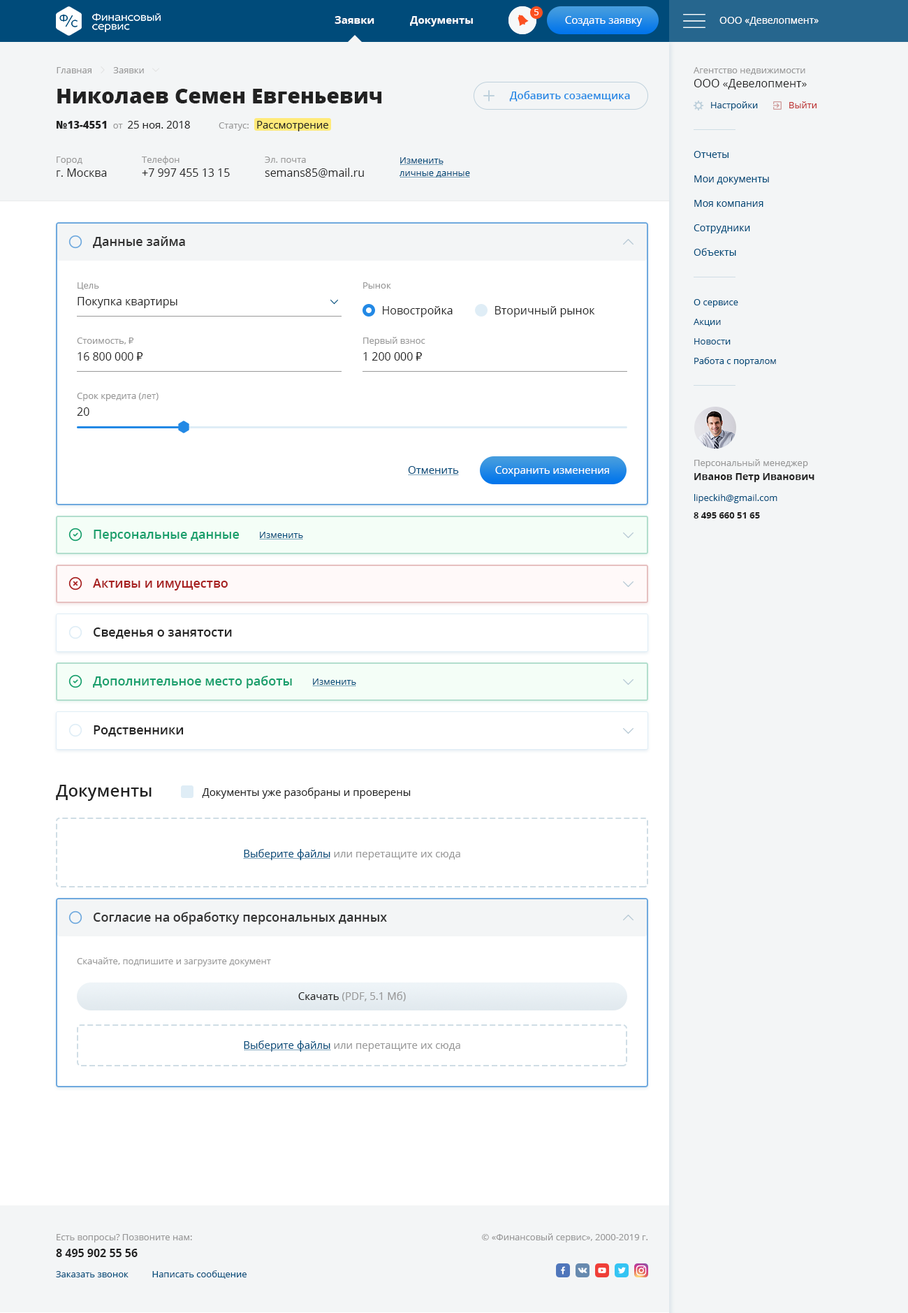
<style>
.page{position:relative;width:908px;height:1313px;background:#ffffff}
.page>*{position:absolute;margin:0}
.t1{font:10.5px "OpenSans-Bold";color:#ffffff}
.t2{font:9.1px "OpenSans";color:#ffffff}
.t3{font:10.5px "OpenSans";color:#ffffff}
.t4{font:9.8px "OpenSans";color:#ffffff}
.t5{font:9.1px "OpenSans";color:#999999}
.t6{font:11.2px/14px "OpenSans";color:#222222}
.t7{font:21px "OpenSans-Extrabold";color:#222222}
.t8{font:10.5px "OpenSans-Semibold";color:#2389e5}
.t9{font:9.1px "OpenSans";color:#004b7a}
.t10{font:9.1px "OpenSans";color:#be3030}
.t11{font:10.5px "OpenSans";color:#222222}
.t12{font:10.5px "OpenSans-Extrabold";color:#222222}
.t13{font:9.1px/12.6px "OpenSans";color:#004b7a}
.t14{font:9.8px/24.5px "OpenSans";color:#004b7a}
.t15{font:12.6px "OpenSans-Semibold";color:#333333}
.t16{font:11.2px/16.8px "OpenSans";color:#222222}
.t17{font:9.1px/19.6px "OpenSans";color:#004b7a}
.t18{font:11.2px "OpenSans";color:#222222}
.t19{font:9.1px "Tahoma";color:#999999}
.t20{font:11.2px/16.8px "Tahoma";color:#222222}
.t21{font:9.8px/14px "OpenSans-Bold";color:#222222}
.t22{font:10.5px "OpenSans";color:#004b7a}
.t23{font:9.1px "OpenSans-Bold";color:#222222}
.t24{font:12.6px "OpenSans-Semibold";color:#189f6c}
.t25{font:12.6px "OpenSans-Semibold";color:#a71f1f}
.t26{font:12.6px "OpenSans-Semibold";color:#222222}
.t27{font:16.8px "OpenSans-Semibold";color:#222222}
.t28{font:10.5px "OpenSans";color:#999999}
.t29{font:9.1px/16.8px "OpenSans";color:#999999}
.t30{font:11.2px/16.8px "OpenSans-Bold";color:#222222}
</style>
<div class="page">
<p class="t1" style="left:335px;top:16px;width:138px;height:11px">Заявки             Документы</p>
<p class="t2" style="left:534px;top:9px;width:5px;height:6px">5</p>
<p class="t3" style="left:565px;top:16px;width:78px;height:11px">Создать заявку</p>
<p class="t4" style="left:720px;top:17px;width:99px;height:9px">ООО «Девелопмент»</p>
<p class="t5" style="left:57px;top:67px;width:87px;height:6px">Главная         Заявки</p>
<p class="t5" style="left:694px;top:67px;width:113px;height:22px">Агентство недвижимости<br><span class="t6">ООО «Девелопмент»</span></p>
<p class="t7" style="left:57px;top:89px;width:325px;height:14px">Николаев Семен Евгеньевич</p>
<p class="t8" style="left:509px;top:91px;width:121px;height:10px">Добавить созаемщика</p>
<p class="t9" style="left:711px;top:101px;width:106px;height:9px">Настройки             <span class="t10">Выйти</span></p>
<p class="t11" style="left:57px;top:121px;width:133px;height:8px"><span class="t12">№13-4551  </span><span class="t5">от  </span>25 ноя. 2018</p>
<p class="t11" style="left:219px;top:121px;width:109px;height:10px"><span class="t5">Статус:   </span>Рассмотрение</p>
<p class="t6" style="left:57px;top:157px;width:50px;height:20px"><span class="t5">Город<br></span>г. Москва</p>
<p class="t6" style="left:142px;top:156px;width:88px;height:21px"><span class="t5">Телефон<br></span>+7 997 455 13 15</p>
<p class="t6" style="left:265px;top:157px;width:99px;height:20px"><span class="t5">Эл. почта<br></span>semans85@mail.ru</p>
<p class="t13" style="left:400px;top:157px;width:70px;height:20px">Изменить <br>личные данные</p>
<p class="t14" style="left:694px;top:151px;width:75px;height:105px">Отчеты<br>Мои документы<br>Моя компания<br>Сотрудники<br>Объекты</p>
<p class="t15" style="left:93px;top:236px;width:92px;height:12px">Данные займа</p>
<p class="t16" style="left:78px;top:282px;width:99px;height:26px"><span class="t5">Цель<br></span>Покупка квартиры</p>
<p class="t5" style="left:363px;top:282px;width:28px;height:7px">Рынок</p>
<p class="t17" style="left:694px;top:299px;width:82px;height:67px">О сервисе<br>Акции<br>Новости<br>Работа с порталом</p>
<p class="t18" style="left:383px;top:306px;width:70px;height:11px">Новостройка</p>
<p class="t18" style="left:495px;top:306px;width:100px;height:11px">Вторичный рынок</p>
<p class="t5" style="left:77px;top:337px;width:66px;height:24px">Стоимость, <span class="t19">₽<br></span><span class="t16">16 800 000 </span><span class="t20">₽</span></p>
<p class="t5" style="left:363px;top:337px;width:62px;height:24px">Первый взнос <br><span class="t16">1 200 000 </span><span class="t20">₽</span></p>
<p class="t5" style="left:77px;top:393px;width:82px;height:23px">Срок кредита (лет)<br><span class="t16">20</span></p>
<p class="t5" style="left:694px;top:459px;width:121px;height:23px">Персональный менеджер<br><span class="t21">Иванов Петр Иванович</span></p>
<p class="t22" style="left:408px;top:466px;width:51px;height:8px">Отменить</p>
<p class="t3" style="left:495px;top:466px;width:114px;height:11px">Сохранить изменения</p>
<p class="t9" style="left:694px;top:494px;width:84px;height:9px">lipeckih@gmail.com</p>
<p class="t23" style="left:694px;top:512px;width:66px;height:6px">8 495 660 51 65</p>
<p class="t24" style="left:94px;top:530px;width:146px;height:11px">Персональные данные</p>
<p class="t9" style="left:260px;top:532px;width:43px;height:6px">Изменить</p>
<p class="t25" style="left:93px;top:579px;width:135px;height:11px">Активы и имущество</p>
<p class="t26" style="left:94px;top:627px;width:138px;height:12px">Сведенья о занятости</p>
<p class="t24" style="left:93px;top:676px;width:199px;height:12px">Дополнительное место работы</p>
<p class="t9" style="left:313px;top:678px;width:43px;height:7px">Изменить</p>
<p class="t26" style="left:94px;top:725px;width:90px;height:11px">Родственники</p>
<p class="t27" style="left:56px;top:785px;width:96px;height:16px">Документы</p>
<p class="t11" style="left:202px;top:787px;width:209px;height:12px">Документы уже разобраны и проверены</p>
<p class="t28" style="left:244px;top:849px;width:216px;height:11px"><span class="t22">Выберите файлы </span>или перетащите их сюда</p>
<p class="t15" style="left:94px;top:912px;width:293px;height:12px">Согласие на обработку персональных данных</p>
<p class="t5" style="left:77px;top:957px;width:194px;height:9px">Скачайте, подпишите и загрузите документ</p>
<p class="t28" style="left:298px;top:991px;width:108px;height:10px"><span class="t11">Скачать</span> (PDF, 5.1 Мб)</p>
<p class="t28" style="left:244px;top:1040px;width:216px;height:12px"><span class="t22">Выберите файлы </span>или перетащите их сюда</p>
<p class="t29" style="left:56px;top:1234px;width:136px;height:23px">Есть вопросы? Позвоните нам:<br><span class="t30">8 495 902 55 56</span></p>
<p class="t5" style="left:482px;top:1233px;width:166px;height:9px">© «Финансовый сервис», 2000-2019 г.</p>
<p class="t9" style="left:56px;top:1270px;width:191px;height:9px">Заказать звонок          Написать сообщение</p>
</div>
